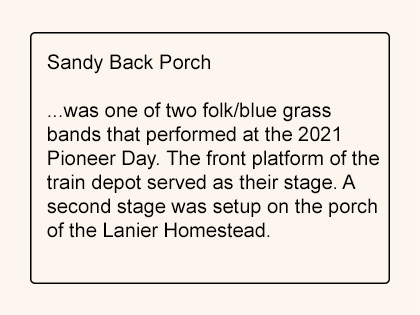
<style>
.page{position:relative;width:420px;height:315px;background:#fdf6ee}
.page>*{position:absolute;margin:0}
.t1{font:20px "ArialMT";color:#000000}
</style>
<div class="page">
<p class="t1" style="left:47px;top:54px;width:332px;height:184px">Sandy Back Porch<br><br>...was one of two folk/blue grass<br>bands that performed at the 2021 <br>Pioneer Day. The front platform of the<br>train depot served as their stage. A<br>second stage was setup on the porch<br>of the Lanier Homestead.</p>
</div>
